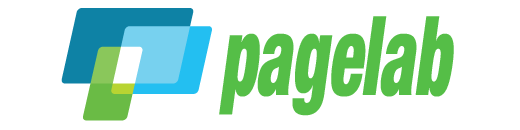
<style>
.page{position:relative;width:520px;height:130px;background:#ffffff}
.page>*{position:absolute;margin:0}
.t1{font:110.2px "HelveticaNeueLT-BlackCondObl";letter-spacing:-0.005em;color:#55be47;scale:0.64 1}
</style>
<div class="page">
<p class="t1" style="left:219px;top:16px;width:235px;height:100px">pagelab</p>
</div>
